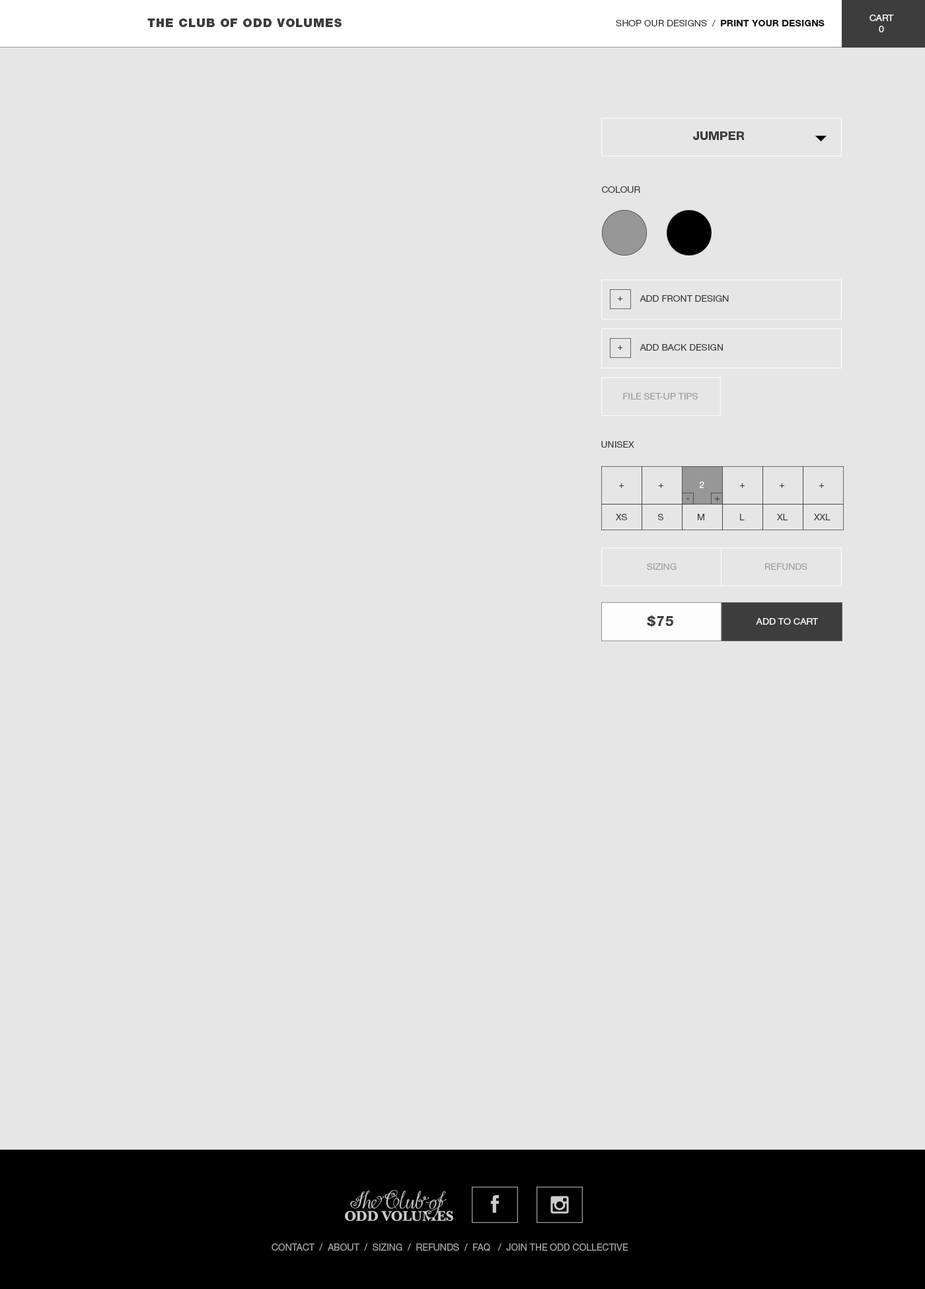
<style>
.page{position:relative;width:925px;height:1289px;background:#e6e6e6}
.page>*{position:absolute;margin:0}
.t1{font:9.2px "HelveticaNeueLTStd-Roman";color:#ffffff}
.t2{font:11.9px "HelveticaNeueLTStd-Blk";letter-spacing:0.05em;color:#3d3d3d}
.t3{font:9.2px "HelveticaNeueLTStd-Roman";color:#3d3d3d}
.t4{font:9.2px "HelveticaNeueLTStd-Hv";color:#1b1b1b}
.t5{font:11.9px "HelveticaNeueLTStd-Hv";color:#3d3d3d}
.t6{font:9.2px "HelveticaNeueLTStd-Roman";color:#3e3e3e}
.t7{font:9.1px "HelveticaNeueLTStd-Roman";color:#3e3e3e}
.t8{font:9.2px "HelveticaNeueLTStd-Roman";color:#a0a0a0}
.t9{font:9.1px "HelveticaNeueLTStd-Roman";color:#ffffff}
.t10{font:9.1px "HelveticaNeueLTStd-Roman";color:#3d3d3d}
.t11{font:13.2px "HelveticaNeueLTStd-Hv";letter-spacing:0.05em;color:#3d3d3d}
.t12{font:9.2px "HelveticaNeueLTStd-Roman";color:#faf9f9}
.t13{font:9.5px "HelveticaNeueLTStd-Roman";color:#9b9b9b}
</style>
<div class="page">
<p class="t1" style="left:869px;top:15px;width:25px;height:17px;text-align:center">CART<br>0</p>
<p class="t2" style="left:147px;top:18px;width:195px;height:9px">THE CLUB OF ODD VOLUMES</p>
<p class="t3" style="left:616px;top:20px;width:208px;height:6px">SHOP OUR DESIGNS  /  <span class="t4">PRINT YOUR DESIGNS</span></p>
<p class="t5" style="left:693px;top:131px;width:51px;height:9px">JUMPER</p>
<p class="t6" style="left:602px;top:186px;width:38px;height:7px">COLOUR</p>
<p class="t7" style="left:618px;top:297px;width:5px;height:4px">+</p>
<p class="t6" style="left:639px;top:295px;width:90px;height:7px">ADD FRONT DESIGN</p>
<p class="t7" style="left:618px;top:345px;width:5px;height:5px">+</p>
<p class="t6" style="left:639px;top:344px;width:84px;height:7px">ADD BACK DESIGN</p>
<p class="t8" style="left:623px;top:393px;width:75px;height:7px">FILE SET-UP TIPS</p>
<p class="t6" style="left:601px;top:441px;width:33px;height:7px">UNISEX</p>
<p class="t7" style="left:619px;top:484px;width:5px;height:4px">+</p>
<p class="t7" style="left:658px;top:484px;width:5px;height:4px">+</p>
<p class="t9" style="left:699px;top:482px;width:5px;height:6px">2</p>
<p class="t7" style="left:740px;top:484px;width:5px;height:4px">+</p>
<p class="t7" style="left:779px;top:484px;width:5px;height:4px">+</p>
<p class="t7" style="left:818px;top:484px;width:6px;height:4px">+</p>
<p class="t7" style="left:715px;top:497px;width:5px;height:4px">+</p>
<p class="t7" style="left:686px;top:498px;width:3px;height:1px">-</p>
<p class="t7" style="left:616px;top:514px;width:11px;height:7px">XS</p>
<p class="t7" style="left:658px;top:514px;width:5px;height:7px">S</p>
<p class="t10" style="left:698px;top:514px;width:6px;height:7px">M</p>
<p class="t7" style="left:740px;top:514px;width:4px;height:7px">L</p>
<p class="t7" style="left:777px;top:514px;width:11px;height:7px">XL</p>
<p class="t7" style="left:814px;top:514px;width:16px;height:7px">XXL</p>
<p class="t8" style="left:647px;top:563px;width:29px;height:7px">SIZING</p>
<p class="t8" style="left:765px;top:563px;width:42px;height:7px">REFUNDS</p>
<p class="t11" style="left:647px;top:615px;width:26px;height:13px">$75</p>
<p class="t12" style="left:756px;top:618px;width:62px;height:7px">ADD TO CART</p>
<p class="t13" style="left:271px;top:1244px;width:357px;height:8px">CONTACT  /  ABOUT  /  SIZING  /  REFUNDS  /  FAQ   /  JOIN THE ODD COLLECTIVE</p>
</div>
